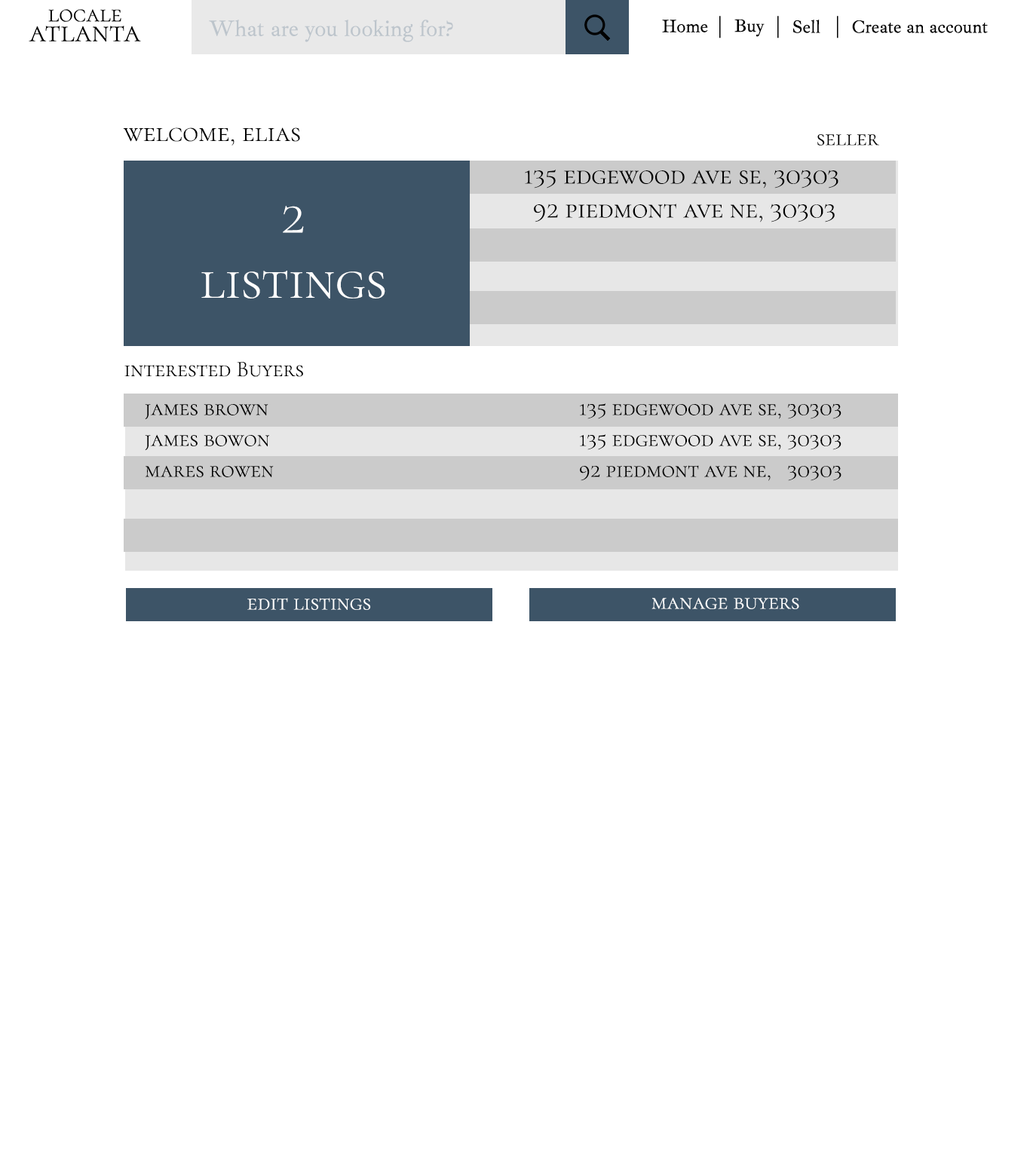
<style>
.page{position:relative;width:1030px;height:1158px;background:#ffffff}
.page>*{position:absolute;margin:0}
.t1{font:27.1px "CormorantSC-Light";color:#000000}
.t2{font:22.6px "CormorantSC-Light";color:#000000}
.t3{font:54.3px "CormorantSC-Light";color:#ffffff}
.t4{font:22.6px "CormorantSC-Light";color:#ffffff}
</style>
<div class="page">
<p class="t1" style="left:123px;top:127px;width:177px;height:18px">welcome, elias</p>
<p class="t2" style="left:817px;top:134px;width:62px;height:11px">seller</p>
<p class="t1" style="left:525px;top:170px;width:313px;height:18px">135 edgewood ave se, 30303</p>
<p class="t3" style="left:201px;top:206px;width:184px;height:93px;text-align:center">2<br>listings</p>
<p class="t1" style="left:534px;top:204px;width:301px;height:18px">92 piedmont ave ne, 30303</p>
<p class="t2" style="left:124px;top:362px;width:179px;height:15px">interested Buyers</p>
<p class="t2" style="left:145px;top:403px;width:696px;height:16px">james brown             135 edgewood ave se, 30303</p>
<p class="t2" style="left:145px;top:434px;width:696px;height:16px">james bowon             135 edgewood ave se, 30303</p>
<p class="t2" style="left:145px;top:465px;width:696px;height:16px">mares rowen             92 piedmont ave ne,   30303</p>
<p class="t4" style="left:247px;top:598px;width:124px;height:12px">edit listings</p>
<p class="t4" style="left:651px;top:597px;width:148px;height:12px">manage buyers</p>
</div>
